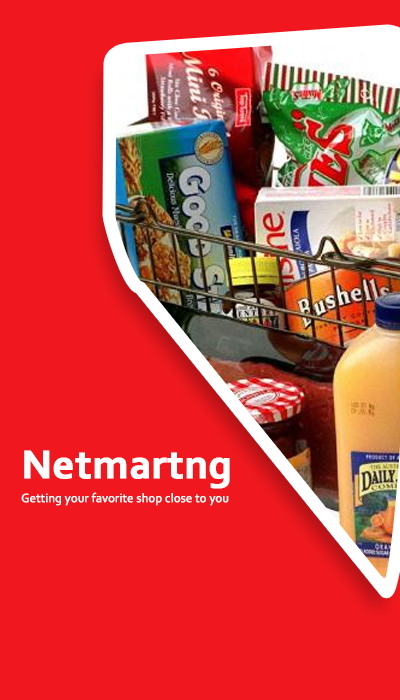
<style>
.page{position:relative;width:400px;height:700px;background:#f0181e}
.page>*{position:absolute;margin:0}
.t1{font:42.2px "Corbel-Bold";color:#ffffff;font-weight:bold}
.t2{font:12.8px "Corbel";color:#ffffff;font-weight:bold;scale:0.96 1}
</style>
<div class="page">
<p class="t1" style="left:24px;top:450px;width:206px;height:39px">Netmartng</p>
<p class="t2" style="left:21px;top:492px;width:208px;height:14px">Getting your favorite shop close to you</p>
</div>
